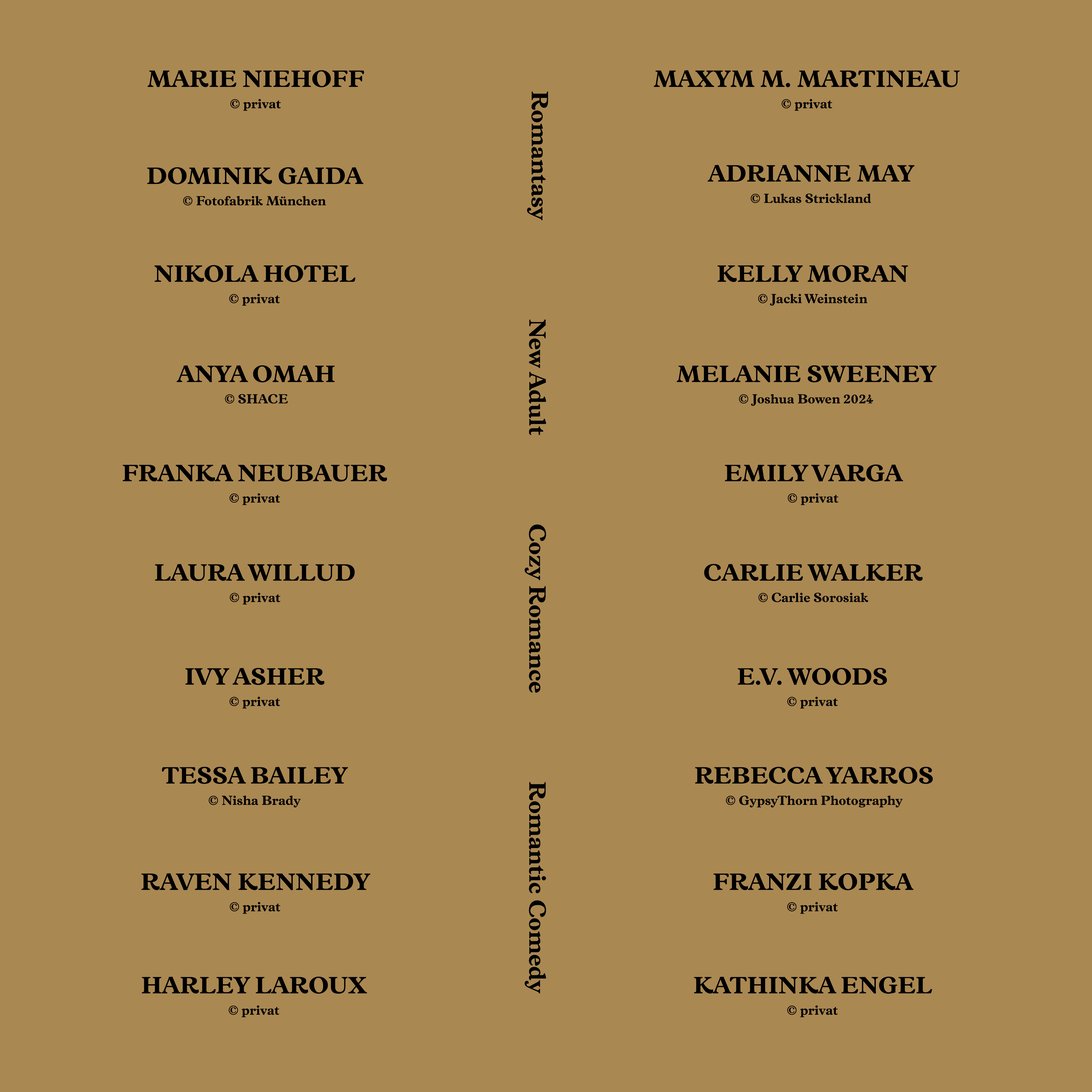
<style>
.page{position:relative;width:1092px;height:1092px;background:#aa8852}
.page>*{position:absolute;margin:0}
.t1{font:24px/21.3px "Vulpa-Bold";color:#000000}
.t2{font:13.3px/21.3px "Vulpa-Bold";color:#000000}
.t3{font:24px "Vulpa-Bold";color:#000000}
.t4{font:13.3px "Vulpa-Bold";color:#000000}
</style>
<div class="page">
<p class="t1" style="left:147px;top:70px;width:217px;height:41px;text-align:center">MARIE NIEHOFF<br><span class="t2">© privat</span></p>
<p class="t1" style="left:654px;top:70px;width:306px;height:41px;text-align:center">MAXYM M. MARTINEAU<br><span class="t2">© privat</span></p>
<p class="t3" style="left:527px;top:91px;width:21px;height:129px;rotate:90deg">Romantasy</p>
<p class="t2" style="left:147px;top:167px;width:216px;height:39px;text-align:center"><span class="t1">DOMINIK GAIDA<br></span>© Fotofabrik München</p>
<p class="t2" style="left:708px;top:165px;width:206px;height:38px;text-align:center"><span class="t1">ADRIANNE MAY<br></span>© Lukas Strickland</p>
<p class="t1" style="left:154px;top:265px;width:201px;height:41px;text-align:center">NIKOLA HOTEL<br><span class="t2">© privat</span></p>
<p class="t2" style="left:717px;top:265px;width:191px;height:41px;text-align:center"><span class="t1">KELLY MORAN<br></span>© Jacki Weinstein</p>
<p class="t3" style="left:529px;top:319px;width:17px;height:116px;rotate:90deg">New Adult</p>
<p class="t1" style="left:176px;top:365px;width:159px;height:39px;text-align:center">ANYA OMAH<br><span class="t2">© SHACE</span></p>
<p class="t2" style="left:677px;top:365px;width:260px;height:41px;text-align:center"><span class="t1">MELANIE SWEENEY<br></span>© Joshua Bowen 2024</p>
<p class="t1" style="left:123px;top:464px;width:264px;height:41px;text-align:center">FRANKA NEUBAUER<br><span class="t2">© privat</span></p>
<p class="t1" style="left:725px;top:464px;width:178px;height:41px;text-align:center">EMILY VARGA<br><span class="t2">© privat</span></p>
<p class="t3" style="left:525px;top:524px;width:21px;height:169px;rotate:90deg">Cozy Romance</p>
<p class="t1" style="left:155px;top:564px;width:200px;height:41px;text-align:center">LAURA WILLUD<br><span class="t2">© privat</span></p>
<p class="t2" style="left:704px;top:564px;width:219px;height:38px;text-align:center"><span class="t1">CARLIE WALKER<br></span>© Carlie Sorosiak</p>
<p class="t1" style="left:185px;top:668px;width:139px;height:41px;text-align:center">IVY ASHER<br><span class="t2">© privat</span></p>
<p class="t1" style="left:738px;top:668px;width:149px;height:41px;text-align:center">E.V. WOODS<br><span class="t2">© privat</span></p>
<p class="t2" style="left:162px;top:767px;width:186px;height:41px;text-align:center"><span class="t1">TESSA BAILEY<br></span>© Nisha Brady</p>
<p class="t2" style="left:695px;top:767px;width:238px;height:41px;text-align:center"><span class="t1">REBECCA YARROS<br></span>© GypsyThorn Photography</p>
<p class="t3" style="left:525px;top:782px;width:21px;height:211px;rotate:90deg">Romantic Comedy</p>
<p class="t1" style="left:141px;top:873px;width:229px;height:41px;text-align:center">RAVEN KENNEDY<br><span class="t2">© privat</span></p>
<p class="t1" style="left:713px;top:873px;width:200px;height:41px;text-align:center">FRANZI KOPKA<br><span class="t2">© privat</span></p>
<p class="t1" style="left:142px;top:977px;width:225px;height:40px;text-align:center">HARLEY LAROUX<br><span class="t2">© privat</span></p>
<p class="t3" style="left:694px;top:977px;width:238px;height:40px;text-align:center">KATHINKA ENGEL<br><span class="t4">© </span><span class="t2">privat</span></p>
</div>
